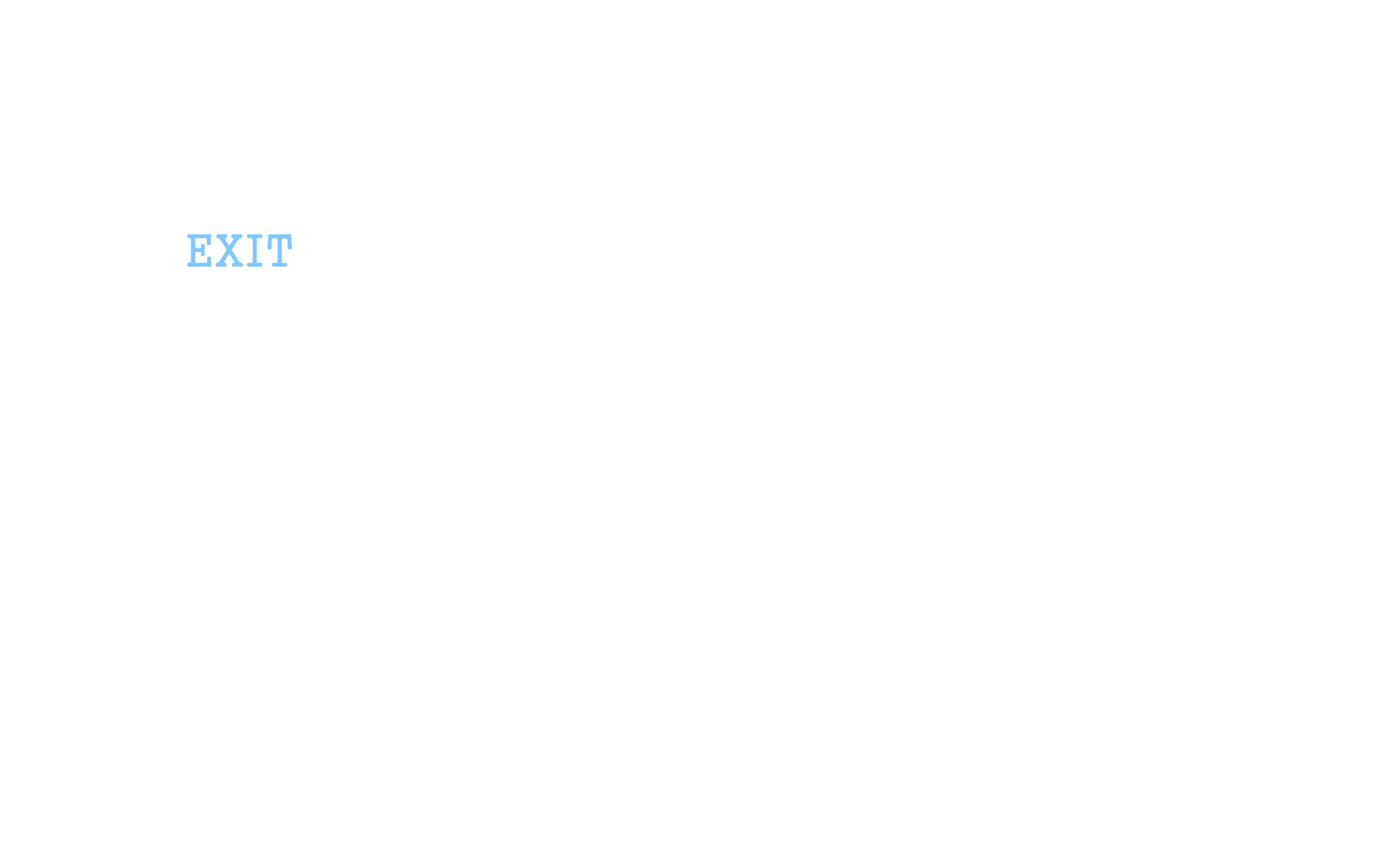
<style>
.page{position:relative;width:1383px;height:862px;background:#ffffff}
.page>*{position:absolute;margin:0}
.t1{font:45px "Gungsuh";color:#7ec7ff}
</style>
<div class="page">
<p class="t1" style="left:187px;top:234px;width:105px;height:34px">EXIT</p>
</div>
